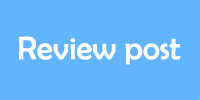
<style>
.page{position:relative;width:200px;height:100px;background:#62b4fc}
.page>*{position:absolute;margin:0}
.t1{font:32.8px "BerlinSansFB-Reg";color:#ffffff}
</style>
<div class="page">
<p class="t1" style="left:18px;top:36px;width:163px;height:29px">Review post</p>
</div>
